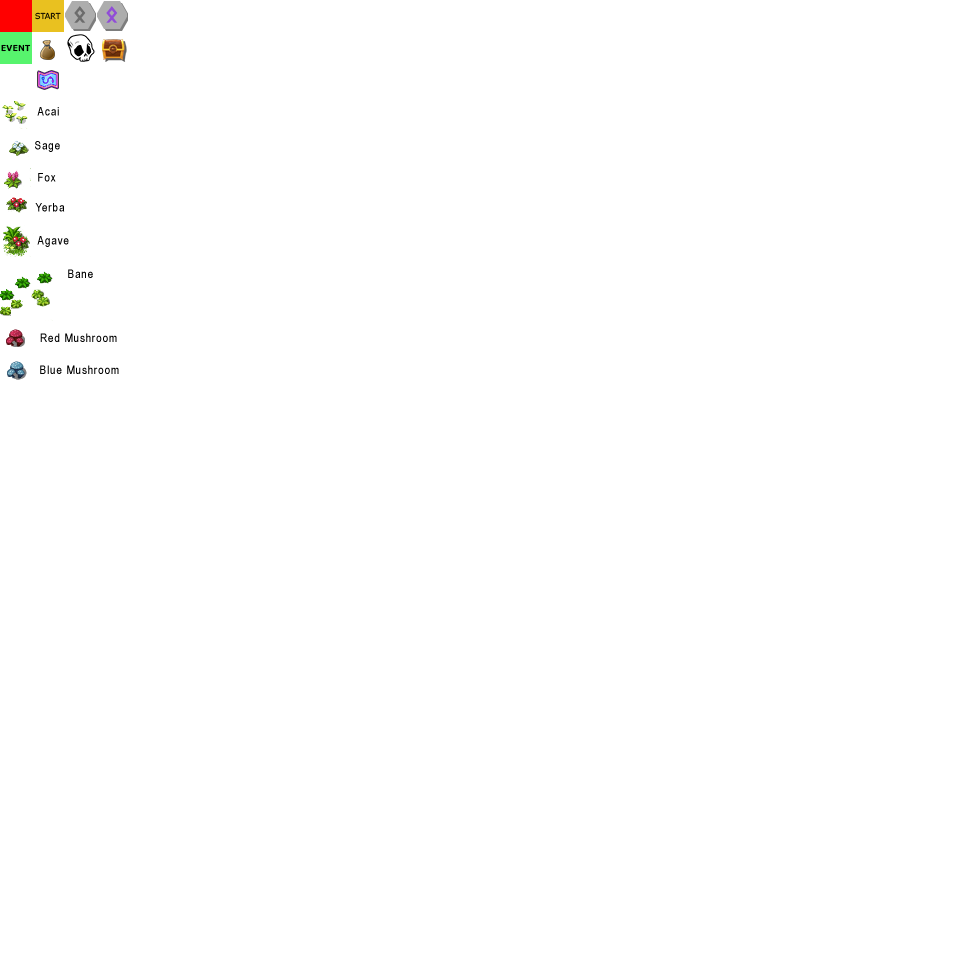
<style>
.page{position:relative;width:960px;height:960px;background:#ffffff}
.page>*{position:absolute;margin:0}
.t1{font:12px "ArialNarrow";letter-spacing:0.075em;color:#000000}
</style>
<div class="page">
<p class="t1" style="left:37px;top:107px;width:22px;height:9px">Acai</p>
<p class="t1" style="left:35px;top:141px;width:25px;height:11px">Sage</p>
<p class="t1" style="left:38px;top:173px;width:18px;height:9px">Fox</p>
<p class="t1" style="left:35px;top:203px;width:30px;height:9px">Yerba</p>
<p class="t1" style="left:37px;top:236px;width:32px;height:11px">Agave</p>
<p class="t1" style="left:68px;top:269px;width:25px;height:9px">Bane</p>
<p class="t1" style="left:40px;top:333px;width:77px;height:9px">Red Mushroom</p>
<p class="t1" style="left:40px;top:365px;width:79px;height:9px">Blue Mushroom</p>
</div>
